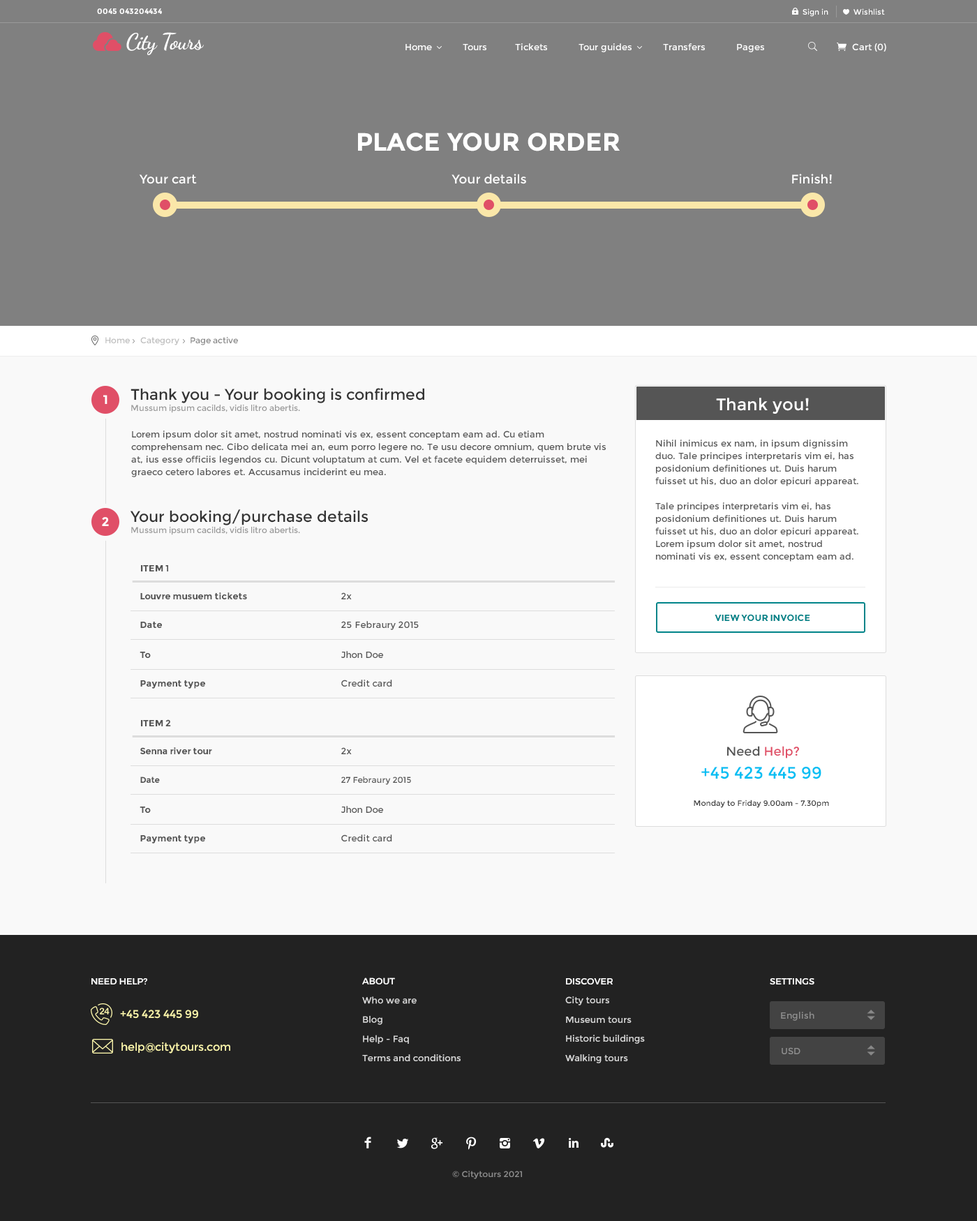
<style>
.page{position:relative;width:977px;height:1221px;background:#f9f9f9}
.page>*{position:absolute;margin:0}
.t1{font:7.7px "Montserrat-Bold";color:#ffffff}
.t2{font:7.7px "Montserrat-Regular";color:#ffffff}
.t3{font:22.3px "DancingScript-Bold";letter-spacing:-0.025em;color:#ffffff}
.t4{font:9.1px "Montserrat-Regular";color:#ffffff}
.t5{font:25.1px "Montserrat-Bold";color:#ffffff}
.t6{font:12.6px "Montserrat-Regular";color:#ffffff}
.t7{font:8.4px "Montserrat-Regular";color:#bebebe}
.t8{font:8.4px "Montserrat-Regular";color:#888888}
.t9{font:8.4px/11.2px "Montserrat-Regular";color:#999999}
.t10{font:15.3px/9.8px "Montserrat-Regular";color:#333333}
.t11{font:12.6px "Montserrat-Bold";color:#ffffff;text-transform:uppercase}
.t12{font:16.7px "Montserrat-Regular";color:#ffffff}
.t13{font:9.1px/12.6px "Montserrat-Regular";color:#555555}
.t14{font:9.1px "Montserrat-Bold";color:#555555}
.t15{font:9.1px "Montserrat-Regular";color:#555555}
.t16{font:9.1px "Montserrat-Bold";color:#008489;text-transform:uppercase}
.t17{font:12.6px "Montserrat-Regular";color:#e04f67}
.t18{font:12.6px "Montserrat-Regular";color:#555555}
.t19{font:16.7px "Montserrat-Regular";color:#00bff3}
.t20{font:8.4px "Montserrat-Regular";color:#555555}
.t21{font:8.4px "Montserrat-Bold";color:#555555}
.t22{font:7.7px "Montserrat-Regular";color:#333333}
.t23{font:9.1px "Montserrat-Regular";color:#d8d8d8}
.t24{font:9.1px/8.4px "Montserrat-Medium";color:#ffffff;text-transform:uppercase}
.t25{font:9.1px "Montserrat-Medium";color:#ffffff;text-transform:uppercase}
.t26{font:11.2px "Montserrat-Regular";color:#fdf7ac}
.t27{font:9.1px "Montserrat-Regular";color:#8e8e8e}
.t28{font:8.2px "Montserrat-Regular";color:#8c8c8c;scale:1.04 1}
</style>
<div class="page">
<p class="t1" style="left:97px;top:8px;width:65px;height:6px">0045 043204434</p>
<p class="t2" style="left:802px;top:8px;width:83px;height:9px">Sign in            Wishlist</p>
<p class="t3" style="left:126px;top:32px;width:78px;height:23px">City Tours</p>
<p class="t4" style="left:405px;top:43px;width:359px;height:9px">Home           Tours          Tickets           Tour guides           Transfers           Pages</p>
<p class="t4" style="left:852px;top:43px;width:34px;height:9px">Cart (0)</p>
<p class="t5" style="left:358px;top:133px;width:262px;height:18px">PLACE YOUR ORDER</p>
<p class="t6" style="left:451px;top:174px;width:75px;height:10px">Your details</p>
<p class="t6" style="left:792px;top:174px;width:40px;height:10px">Finish!</p>
<p class="t6" style="left:139px;top:174px;width:58px;height:10px">Your cart</p>
<p class="t7" style="left:105px;top:337px;width:133px;height:8px">Home     Category     <span class="t8">Page active</span></p>
<p class="t9" style="left:130px;top:388px;width:294px;height:25px"><span class="t10">Thank you - Your booking is confirmed<br></span>Mussum ipsum cacilds, vidis litro abertis.</p>
<p class="t11" style="left:103px;top:395px;width:4px;height:9px">1</p>
<p class="t12" style="left:716px;top:398px;width:93px;height:16px">Thank you!</p>
<p class="t13" style="left:131px;top:430px;width:475px;height:47px">Lorem ipsum dolor sit amet, nostrud nominati vis ex, essent conceptam eam ad. Cu etiam comprehensam nec. Cibo delicata mei an, eum porro legere no. Te usu decore omnium, quem brute vis at, ius esse officiis legendos cu. Dicunt voluptatum at cum. Vel et facete equidem deterruisset, mei graeco cetero labores et. Accusamus inciderint eu mea.</p>
<p class="t13" style="left:655px;top:440px;width:203px;height:122px">Nihil inimicus ex nam, in ipsum dignissim duo. Tale principes interpretaris vim ei, has posidonium definitiones ut. Duis harum fuisset ut his, duo an dolor epicuri appareat.<br><br>Tale principes interpretaris vim ei, has posidonium definitiones ut. Duis harum fuisset ut his, duo an dolor epicuri appareat. Lorem ipsum dolor sit amet, nostrud nominati vis ex, essent conceptam eam ad.</p>
<p class="t9" style="left:130px;top:509px;width:238px;height:26px"><span class="t10">Your booking/purchase details<br></span>Mussum ipsum cacilds, vidis litro abertis.</p>
<p class="t11" style="left:102px;top:517px;width:7px;height:9px">2</p>
<p class="t14" style="left:141px;top:565px;width:27px;height:6px">ITEM 1</p>
<p class="t14" style="left:140px;top:592px;width:212px;height:7px">Louvre musuem tickets<span class="t15">    2x</span></p>
<p class="t16" style="left:714px;top:614px;width:96px;height:7px">VIEW YOUR INVOICE</p>
<p class="t15" style="left:140px;top:621px;width:279px;height:9px"><span class="t14">Date</span>        25 Febraury 2015</p>
<p class="t15" style="left:140px;top:651px;width:243px;height:7px"><span class="t14">To</span>        Jhon Doe</p>
<p class="t14" style="left:140px;top:680px;width:252px;height:9px">Payment type<span class="t15">      Credit card</span></p>
<p class="t14" style="left:141px;top:719px;width:30px;height:7px">ITEM 2</p>
<p class="t14" style="left:140px;top:747px;width:212px;height:7px">Senna river tour<span class="t15">      2x</span></p>
<p class="t17" style="left:727px;top:746px;width:72px;height:12px"><span class="t18">Need</span> Help?</p>
<p class="t19" style="left:701px;top:766px;width:120px;height:13px">+45 423 445 99</p>
<p class="t20" style="left:140px;top:776px;width:271px;height:9px"><span class="t21">Date</span>        27 Febraury 2015</p>
<p class="t15" style="left:140px;top:806px;width:243px;height:7px"><span class="t14">To</span>        Jhon Doe</p>
<p class="t22" style="left:693px;top:800px;width:136px;height:8px">Monday to Friday 9.00am - 7.30pm</p>
<p class="t14" style="left:140px;top:834px;width:252px;height:9px">Payment type<span class="t15">      Credit card</span></p>
<p class="t23" style="left:362px;top:977px;width:98px;height:84px"><span class="t24">About<br></span>Who we are<br>Blog<br>Help - Faq<br>Terms and conditions</p>
<p class="t25" style="left:91px;top:978px;width:56px;height:7px">Need help?</p>
<p class="t23" style="left:565px;top:978px;width:80px;height:85px"><span class="t24">Discover<br></span>City tours<br>Museum tours<br>Historic buildings<br>Walking tours</p>
<p class="t25" style="left:770px;top:978px;width:44px;height:7px">Settings</p>
<p class="t26" style="left:120px;top:1009px;width:78px;height:10px">+45 423 445 99</p>
<p class="t27" style="left:781px;top:1012px;width:33px;height:9px">English</p>
<p class="t26" style="left:121px;top:1042px;width:109px;height:11px">help@citytours.com</p>
<p class="t27" style="left:781px;top:1047px;width:19px;height:7px">USD</p>
<p class="t28" style="left:452px;top:1171px;width:70px;height:8px">© Citytours 2021</p>
</div>
